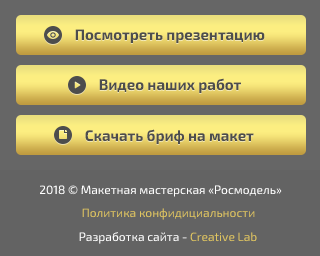
<style>
.page{position:relative;width:320px;height:256px;background:#636363}
.page>*{position:absolute;margin:0}
.t1{font:15px "Exo2-Bold";color:#4d4d4d}
.t2{font:12px "Exo2-Regular";color:#ffffff}
.t3{font:12px "Exo2-Regular";color:#dfc560}
</style>
<div class="page">
<p class="t1" style="left:75px;top:29px;width:190px;height:14px">Посмотреть презентацию</p>
<p class="t1" style="left:99px;top:78px;width:142px;height:15px">Видео наших работ</p>
<p class="t1" style="left:85px;top:129px;width:169px;height:15px">Скачать бриф на макет</p>
<p class="t2" style="left:40px;top:185px;width:242px;height:12px">2018 © Макетная мастерская «Росмодель»</p>
<p class="t3" style="left:82px;top:208px;width:173px;height:12px">Политика конфидициальности</p>
<p class="t2" style="left:79px;top:232px;width:178px;height:12px">Разработка сайта - <span class="t3">Creative Lab</span></p>
</div>
